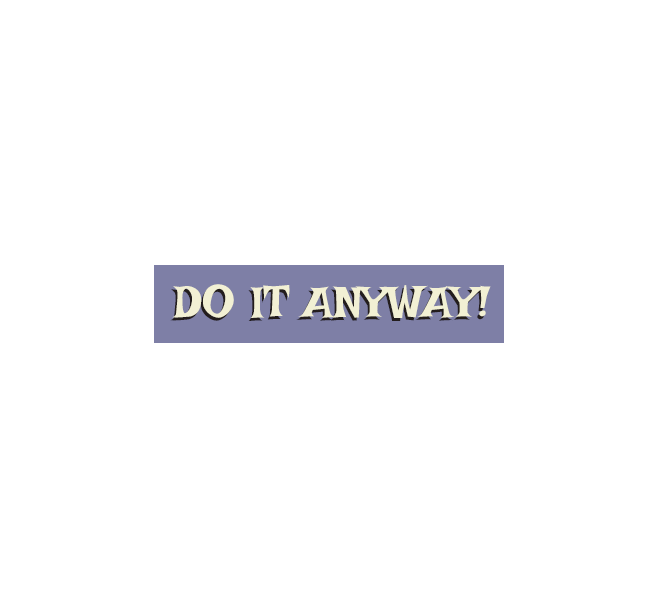
<style>
.page{position:relative;width:658px;height:608px;background:#ffffff}
.page>*{position:absolute;margin:0}
.t1{font:45.8px "IrishGrover-Regular";color:#f2f0d4}
</style>
<div class="page">
<p class="t1" style="left:172px;top:284px;width:319px;height:34px">DO IT ANYWAY!</p>
</div>
